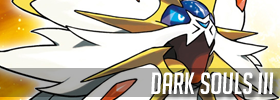
<style>
.page{position:relative;width:280px;height:100px}
.page>*{position:absolute;margin:0}
.t1{font:30px "BigNoodleTitling-Oblique";color:#ffffff}
</style>
<div class="page">
<p class="t1" style="left:151px;top:72px;width:123px;height:22px">dark souls iii</p>
</div>
